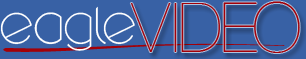
<style>
.page{position:relative;width:306px;height:59px;background:#3861a5}
.page>*{position:absolute;margin:0}
.t1{font:43.6px "round";letter-spacing:0.025em;color:#ffffff}
.t2{font:68.9px "HelveticaNeue-UltraLight";letter-spacing:-0.075em;color:#a30008}
</style>
<div class="page">
<p class="t1" style="left:0px;top:6px;width:135px;height:45px">eagle</p>
<p class="t2" style="left:130px;top:1px;width:170px;height:52px">VIDEO</p>
</div>
